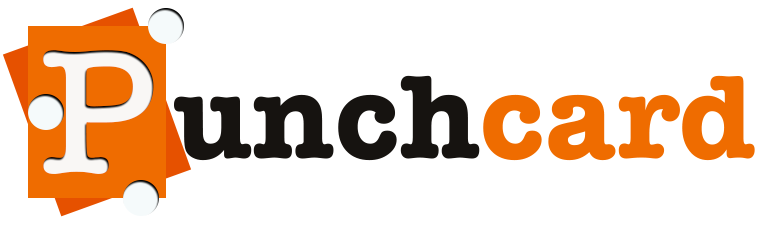
<style>
.page{position:relative;width:779px;height:240px;background:#ffffff}
.page>*{position:absolute;margin:0}
.t1{font:182.9px "AmericanTypewriter-Semibold";letter-spacing:0.01em;color:#f9f7f5}
.t2{font:122.4px "AmericanTypewriter-Bold";letter-spacing:0.01em;color:#161310}
.t3{font:122.4px "AmericanTypewriter-Bold";letter-spacing:0.01em;color:#ef6c00}
</style>
<div class="page">
<p class="t1" style="left:43px;top:50px;width:111px;height:124px">P</p>
<p class="t2" style="left:174px;top:75px;width:581px;height:86px">unch<span class="t3">card</span></p>
</div>
